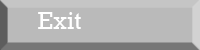
<style>
.page{position:relative;width:200px;height:50px;background:#bababa}
.page>*{position:absolute;margin:0}
.t1{font:25px "Rockwell";color:#ffffff}
</style>
<div class="page">
<p class="t1" style="left:38px;top:12px;width:43px;height:17px">Exit</p>
</div>
